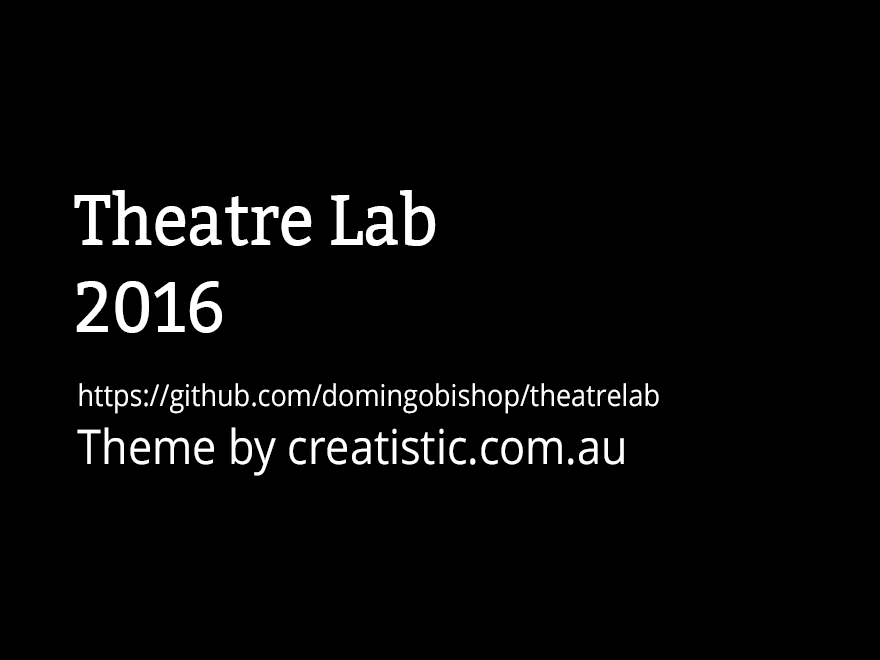
<style>
.page{position:relative;width:880px;height:660px;background:#000000}
.page>*{position:absolute;margin:0}
.t1{font:72px "Bitter-Regular";color:#ffffff;scale:0.9 1}
.t2{font:30px "OpenSans";color:#ffffff;scale:0.9 1}
.t3{font:48px "OpenSans";color:#ffffff;scale:0.9 1}
</style>
<div class="page">
<p class="t1" style="left:74px;top:190px;width:362px;height:143px">Theatre Lab <br>2016</p>
<p class="t2" style="left:77px;top:383px;width:582px;height:93px">https://github.com/domingobishop/theatrelab<br><span class="t3">Theme by creatistic.com.au</span></p>
</div>
